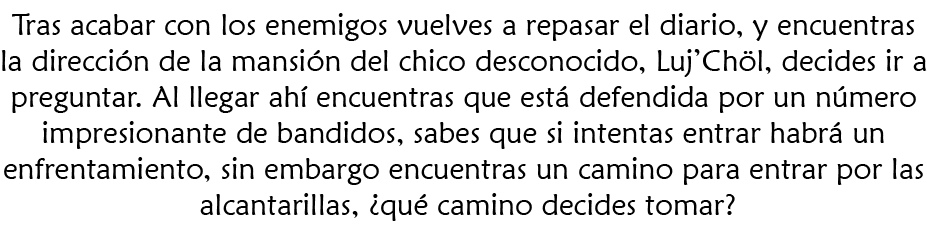
<style>
.page{position:relative;width:927px;height:229px;background:#ffffff}
.page>*{position:absolute;margin:0}
.t1{font:30px "MaiandraGD-Regular";color:#000000}
</style>
<div class="page">
<p class="t1" style="left:1px;top:13px;width:926px;height:208px;text-align:center">Tras acabar con los enemigos vuelves a repasar el diario, y encuentras <br>la dirección de la mansión del chico desconocido, Luj’Chöl, decides ir a <br>preguntar. Al llegar ahí encuentras que está defendida por un número <br>impresionante de bandidos, sabes que si intentas entrar habrá un <br>enfrentamiento, sin embargo encuentras un camino para entrar por las <br>alcantarillas, ¿qué camino decides tomar?</p>
</div>
